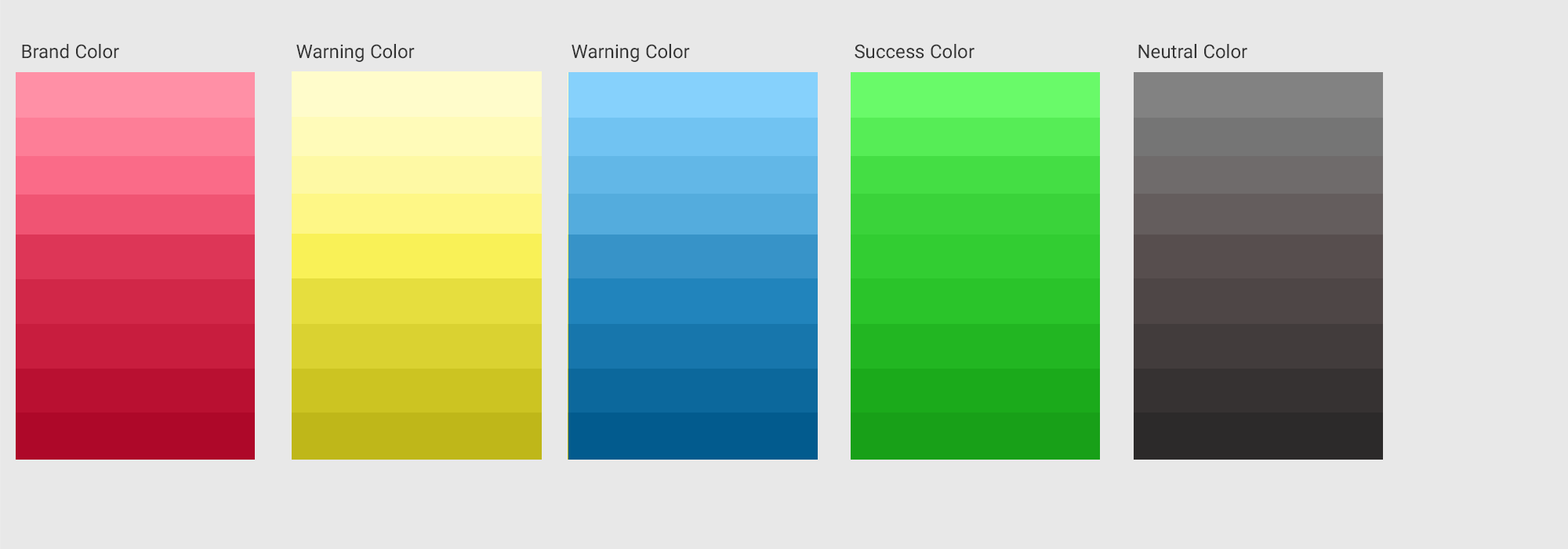
<style>
.page{position:relative;width:1568px;height:549px;background:#e8e8e8}
.page>*{position:absolute;margin:0}
.t1{font:18.8px "Vazirmatn-Regular";color:#333333}
</style>
<div class="page">
<p class="t1" style="left:22px;top:44px;width:97px;height:15px">Brand Color</p>
<p class="t1" style="left:296px;top:44px;width:119px;height:18px">Warning Color</p>
<p class="t1" style="left:572px;top:44px;width:118px;height:18px">Warning Color</p>
<p class="t1" style="left:855px;top:44px;width:120px;height:15px">Success Color</p>
<p class="t1" style="left:1138px;top:44px;width:109px;height:15px">Neutral Color</p>
</div>
